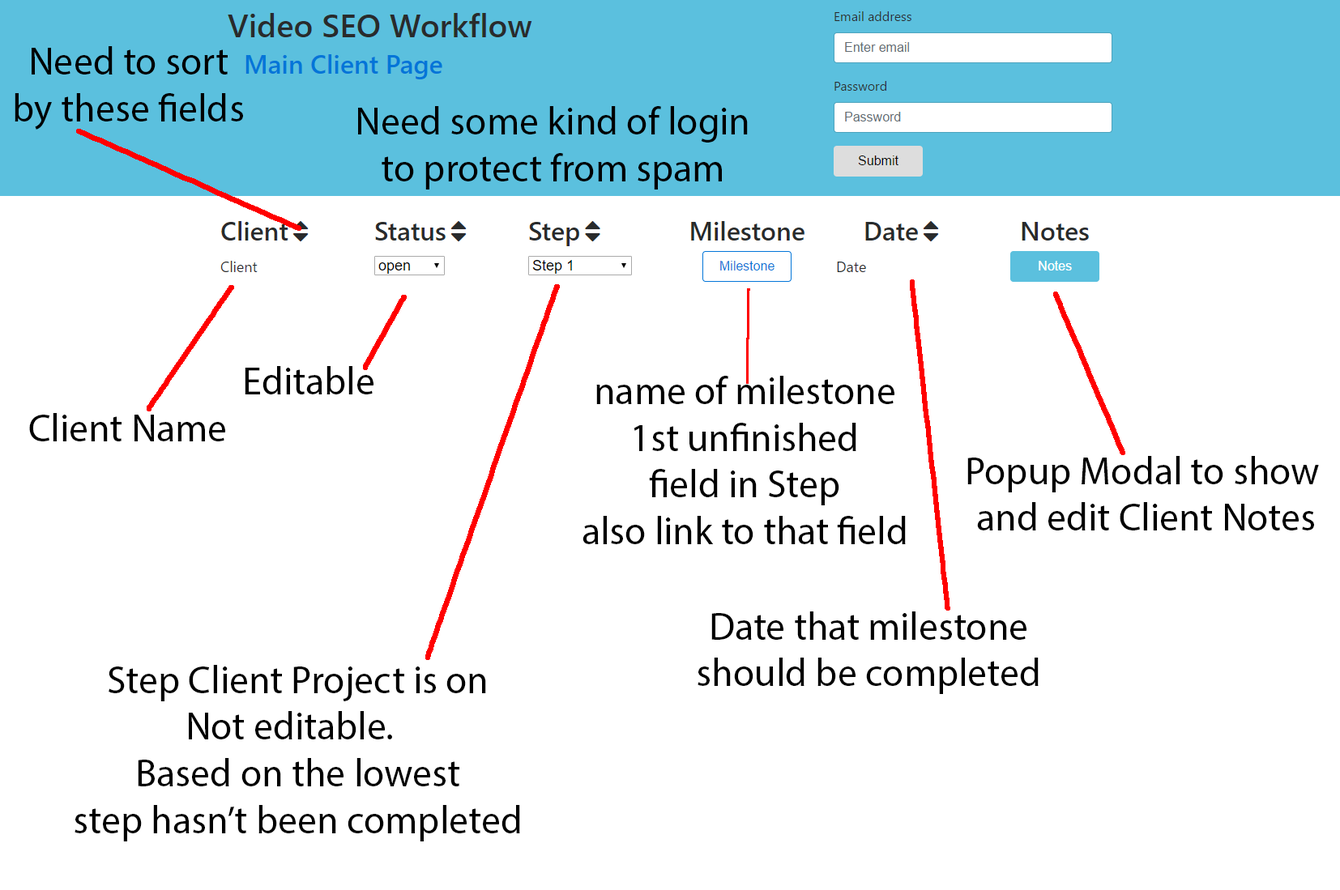
<style>
.page{position:relative;width:1340px;height:890px;background:#ffffff}
.page>*{position:absolute;margin:0}
.t1{font:38.9px "MyriadPro-Regular";color:#000000}
</style>
<div class="page">
<p class="t1" style="left:15px;top:46px;width:228px;height:84px;text-align:center">Need to sort<br>by these fields</p>
<p class="t1" style="left:358px;top:106px;width:390px;height:84px;text-align:center">Need some kind of login<br>to protect from spam</p>
<p class="t1" style="left:245px;top:366px;width:128px;height:28px">Editable</p>
<p class="t1" style="left:582px;top:376px;width:324px;height:168px;text-align:center">name of milestone<br>1st unfinished<br>field in Step<br>also link to that field</p>
<p class="t1" style="left:29px;top:413px;width:196px;height:28px">Client Name</p>
<p class="t1" style="left:967px;top:456px;width:352px;height:75px;text-align:center">Popup Modal to show <br>and edit Client Notes</p>
<p class="t1" style="left:697px;top:612px;width:341px;height:82px;text-align:center">Date that milestone<br>should be completed</p>
<p class="t1" style="left:75px;top:665px;width:445px;height:177px;text-align:center">Step Client Project is on<br>Not editable.  <br>Based on the lowest<br>step hasn’t been completed</p>
</div>
